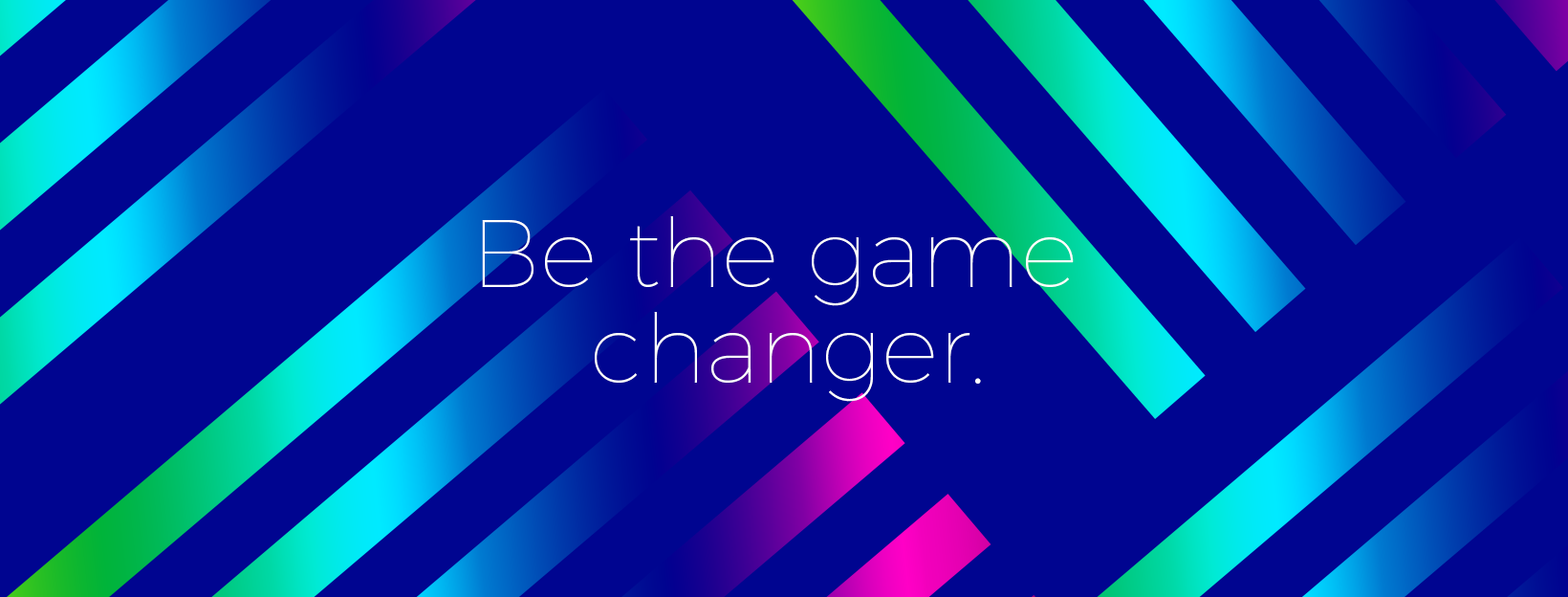
<style>
.page{position:relative;width:1568px;height:597px;background:#000590}
.page>*{position:absolute;margin:0}
.t1{font:95.6px/95.6px "Montserrat-Hairline";color:#ffffff}
</style>
<div class="page">
<p class="t1" style="left:482px;top:216px;width:592px;height:186px;text-align:center">Be the game <br>changer.</p>
</div>
